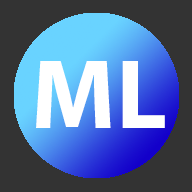
<style>
.page{position:relative;width:192px;height:192px;background:#333333}
.page>*{position:absolute;margin:0}
.t1{font:100px "MyriadPro-Bold";color:#ffffff}
</style>
<div class="page">
<p class="t1" style="left:36px;top:61px;width:129px;height:67px">ML</p>
</div>
